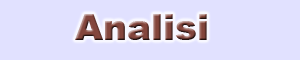
<style>
.page{position:relative;width:300px;height:60px;background:#e1e1ff}
.page>*{position:absolute;margin:0}
.t1{font:36px "Arial-Black"}
</style>
<div class="page">
<p class="t1" style="left:75px;top:14px;width:132px;height:26px">Analisi</p>
</div>
